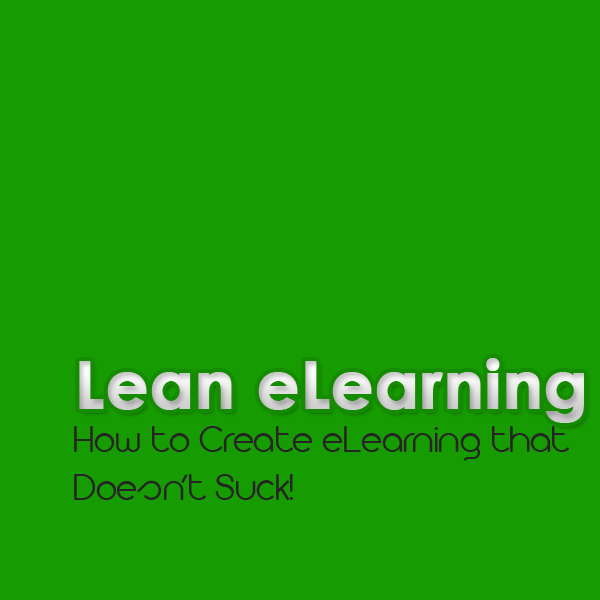
<style>
.page{position:relative;width:600px;height:600px;background:#169b00}
.page>*{position:absolute;margin:0}
.t1{font:66px "CenturyGothic-Bold";font-weight:bold}
.t2{font:40px/48px "Arista2.0AlternateLight";color:#252525}
</style>
<div class="page">
<p class="t1" style="left:79px;top:358px;width:505px;height:65px">Lean eLearning</p>
<p class="t2" style="left:74px;top:426px;width:495px;height:74px">How to Create eLearning that<br>Doesn’t Suck!</p>
</div>
